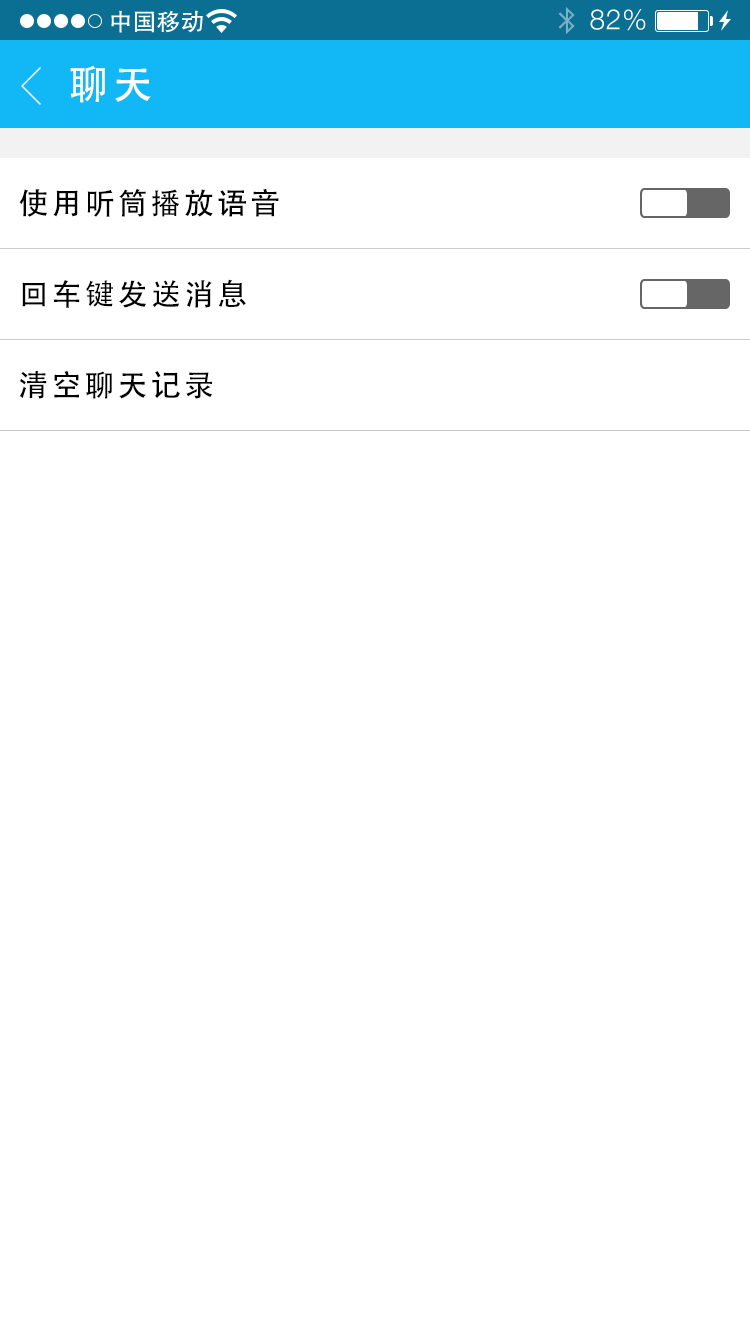
<style>
.page{position:relative;width:750px;height:1334px;background:#ffffff}
.page>*{position:absolute;margin:0}
.t1{font:40px "AdobeHeitiStd-Regular";letter-spacing:0.104em;color:#ffffff}
.t2{font:30px "AdobeHeitiStd-Regular";letter-spacing:0.104em;color:#000000}
</style>
<div class="page">
<p class="t1" style="left:70px;top:65px;width:81px;height:38px">聊天</p>
<p class="t2" style="left:19px;top:188px;width:260px;height:29px">使用听筒播放语音</p>
<p class="t2" style="left:22px;top:279px;width:224px;height:29px">回车键发送消息</p>
<p class="t2" style="left:19px;top:371px;width:194px;height:28px">清空聊天记录</p>
</div>
